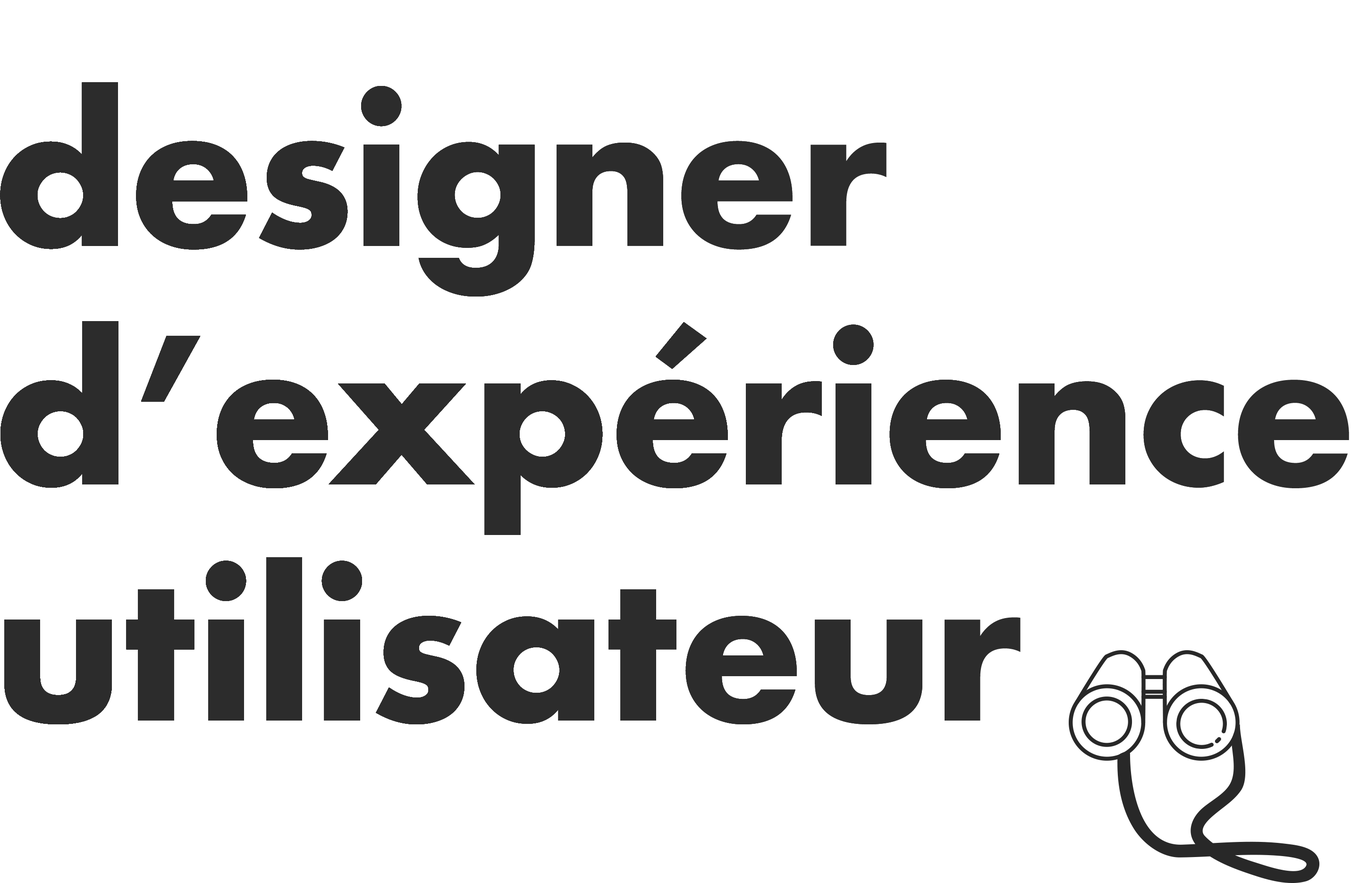
<style>
.page{position:relative;width:1351px;height:883px;background:#ffffff}
.page>*{position:absolute;margin:0}
.t1{font:196.7px "Futura-Bold";letter-spacing:-0.01em;color:#2c2c2c}
</style>
<div class="page">
<p class="t1" style="left:0px;top:82px;width:118px;height:167px">d</p>
<p class="t1" style="left:0px;top:82px;width:247px;height:168px">de</p>
<p class="t1" style="left:0px;top:82px;width:348px;height:168px">des</p>
<p class="t1" style="left:0px;top:82px;width:402px;height:168px">desi</p>
<p class="t1" style="left:0px;top:82px;width:535px;height:214px">desig</p>
<p class="t1" style="left:0px;top:82px;width:663px;height:214px">design</p>
<p class="t1" style="left:0px;top:82px;width:793px;height:214px">designe</p>
<p class="t1" style="left:0px;top:82px;width:886px;height:214px">designer</p>
<p class="t1" style="left:0px;top:321px;width:118px;height:167px">d</p>
<p class="t1" style="left:0px;top:321px;width:201px;height:167px">d’</p>
<p class="t1" style="left:0px;top:321px;width:328px;height:167px">d’e</p>
<p class="t1" style="left:0px;top:321px;width:475px;height:167px">d’ex</p>
<p class="t1" style="left:0px;top:321px;width:603px;height:214px">d’exp</p>
<p class="t1" style="left:0px;top:321px;width:728px;height:214px">d’expé</p>
<p class="t1" style="left:0px;top:321px;width:822px;height:214px">d’expér</p>
<p class="t1" style="left:0px;top:321px;width:874px;height:214px">d’expéri</p>
<p class="t1" style="left:0px;top:321px;width:1001px;height:214px">d’expérie</p>
<p class="t1" style="left:0px;top:321px;width:1125px;height:214px">d’expérien</p>
<p class="t1" style="left:0px;top:321px;width:1224px;height:214px">d’expérienc</p>
<p class="t1" style="left:0px;top:321px;width:1349px;height:214px">d’expérience</p>
<p class="t1" style="left:4px;top:557px;width:298px;height:167px">util</p>
<p class="t1" style="left:4px;top:557px;width:358px;height:167px">utili</p>
<p class="t1" style="left:4px;top:557px;width:460px;height:167px">utilis</p>
<p class="t1" style="left:4px;top:557px;width:590px;height:167px">utilisa</p>
<p class="t1" style="left:4px;top:557px;width:672px;height:167px">utilisat</p>
<p class="t1" style="left:4px;top:557px;width:793px;height:167px">utilisate</p>
<p class="t1" style="left:4px;top:557px;width:918px;height:167px">utilisateu</p>
<p class="t1" style="left:4px;top:557px;width:1017px;height:167px">utilisateur</p>
<p class="t1" style="left:4px;top:560px;width:242px;height:164px">uti</p>
<p class="t1" style="left:4px;top:589px;width:190px;height:135px">ut</p>
<p class="t1" style="left:4px;top:619px;width:108px;height:105px">u</p>
</div>
